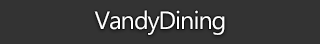
<style>
.page{position:relative;width:320px;height:44px;background:#333333}
.page>*{position:absolute;margin:0}
.t1{font:25px "Ebrima";letter-spacing:-0.04em;color:#ffffff}
</style>
<div class="page">
<p class="t1" style="left:94px;top:10px;width:131px;height:25px">VandyDining</p>
</div>
